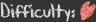
<style>
.page{position:relative;width:96px;height:22px;background:#333333}
.page>*{position:absolute;margin:0}
.t1{font:20px "DJBChalkItUp"}
</style>
<div class="page">
<p class="t1" style="left:0px;top:2px;width:75px;height:20px">Difficulty:</p>
</div>
